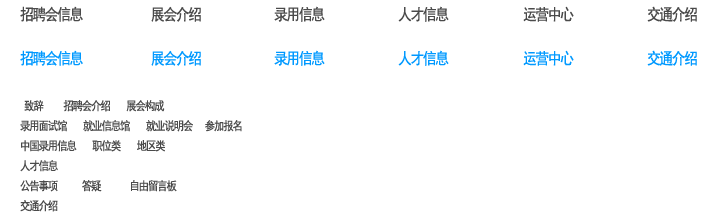
<style>
.page{position:relative;width:714px;height:220px;background:#ffffff}
.page>*{position:absolute;margin:0}
.t1{font:16px "SimHei";letter-spacing:-0.1em;color:#4a4a4a;scale:0.86 1}
.t2{font:16px "SimHei";letter-spacing:-0.1em;color:#0099ff;scale:0.86 1}
.t3{font:12px/20px "SimHei";letter-spacing:-0.1em;color:#4a4a4a;scale:0.86 1}
</style>
<div class="page">
<p class="t1" style="left:20px;top:6px;width:63px;height:16px">招聘会信息</p>
<p class="t1" style="left:151px;top:6px;width:50px;height:16px">展会介绍</p>
<p class="t1" style="left:274px;top:6px;width:51px;height:16px">录用信息</p>
<p class="t1" style="left:398px;top:6px;width:51px;height:16px">人才信息</p>
<p class="t1" style="left:523px;top:6px;width:51px;height:16px">运营中心</p>
<p class="t1" style="left:647px;top:6px;width:50px;height:16px">交通介绍</p>
<p class="t2" style="left:20px;top:50px;width:63px;height:16px">招聘会信息</p>
<p class="t2" style="left:151px;top:50px;width:50px;height:16px">展会介绍</p>
<p class="t2" style="left:274px;top:50px;width:51px;height:16px">录用信息</p>
<p class="t2" style="left:398px;top:50px;width:51px;height:16px">人才信息</p>
<p class="t2" style="left:523px;top:50px;width:51px;height:16px">运营中心</p>
<p class="t2" style="left:647px;top:50px;width:50px;height:16px">交通介绍</p>
<p class="t3" style="left:20px;top:100px;width:222px;height:112px">致辞     招聘会介绍    展会构成<br>录用面试馆    就业信息馆    就业说明会   参加报名<br>中国录用信息    职位类    地区类<br>人才信息<br>公告事项      答疑       自由留言板<br>交通介绍</p>
</div>
